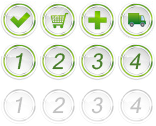
<style>
.page{position:relative;width:156px;height:126px;background:#ffffff}
.page>*{position:absolute;margin:0}
.t1{font:20.8px "Kartika";color:#487d2a;font-style:italic}
.t2{font:20.8px "Kartika";color:#c2c2c2;font-style:italic}
</style>
<div class="page">
<p class="t1" style="left:16px;top:53px;width:7px;height:17px">1</p>
<p class="t1" style="left:52px;top:53px;width:13px;height:17px">2</p>
<p class="t1" style="left:92px;top:53px;width:11px;height:17px">3</p>
<p class="t1" style="left:129px;top:53px;width:12px;height:17px">4</p>
<p class="t2" style="left:16px;top:97px;width:7px;height:17px">1</p>
<p class="t2" style="left:52px;top:97px;width:13px;height:17px">2</p>
<p class="t2" style="left:91px;top:97px;width:12px;height:17px">3</p>
<p class="t2" style="left:130px;top:97px;width:12px;height:17px">4</p>
</div>
